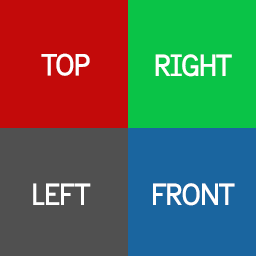
<style>
.page{position:relative;width:256px;height:256px;background:#c30a0a}
.page>*{position:absolute;margin:0}
.t1{font:30px "SwedenSans";letter-spacing:-0.025em;color:#ffffff;text-transform:uppercase}
</style>
<div class="page">
<p class="t1" style="left:41px;top:53px;width:49px;height:23px">top</p>
<p class="t1" style="left:155px;top:54px;width:77px;height:23px">right</p>
<p class="t1" style="left:33px;top:183px;width:58px;height:22px">left</p>
<p class="t1" style="left:153px;top:183px;width:82px;height:23px">front</p>
</div>
